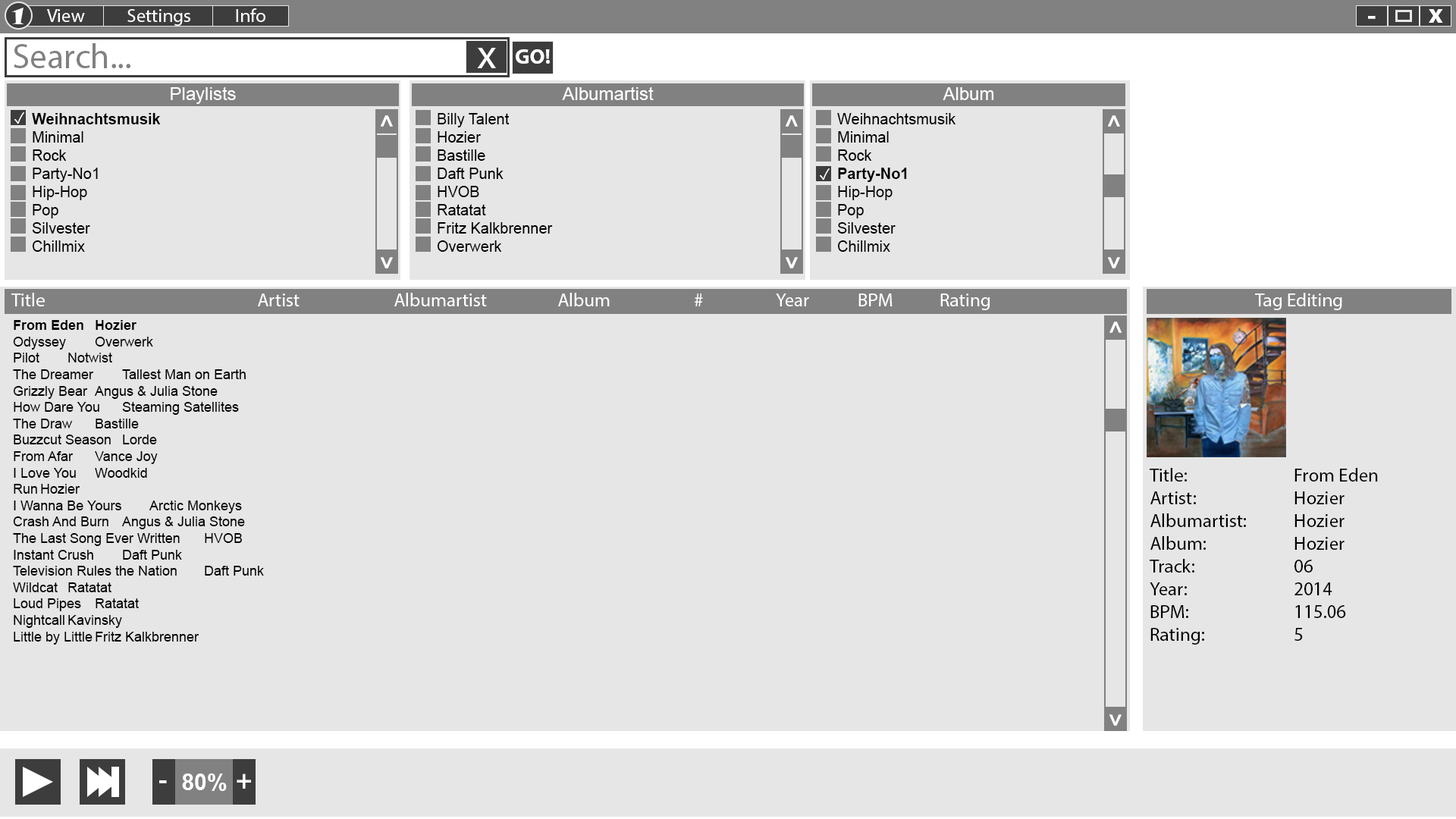
<style>
.page{position:relative;width:1456px;height:819px;background:#e6e6e6}
.page>*{position:absolute;margin:0}
.t1{font:22.7px "SnapITC-Regular";color:#ffffff}
.t2{font:19px "MyriadPro-Regular";color:#ffffff}
.t3{font:27.3px "MyriadPro-Bold";color:#ffffff}
.t4{font:34.9px "MyriadPro-Regular";color:#818181}
.t5{font:41.7px "MyriadPro-Regular";color:#ffffff}
.t6{font:21.2px "MyriadPro-Bold";color:#ffffff}
.t7{font:18.2px "ArialMT";color:#fefefe}
.t8{font:15.2px "ArialMT";color:#000000}
.t9{font:15.2px "Arial-BoldMT";color:#000000}
.t10{font:22.7px "Arial-BoldMT";color:#ffffff}
.t11{font:13.6px "ArialMT";color:#000000}
.t12{font:13.6px "Arial-BoldMT";color:#000000}
.t13{font:19px "MyriadPro-Regular";color:#000000}
</style>
<div class="page">
<p class="t1" style="left:11px;top:8px;width:13px;height:16px">1</p>
<p class="t2" style="left:47px;top:9px;width:38px;height:13px">View</p>
<p class="t2" style="left:127px;top:9px;width:63px;height:17px">Settings</p>
<p class="t2" style="left:236px;top:8px;width:29px;height:14px">Info</p>
<p class="t3" style="left:1368px;top:16px;width:8px;height:3px">-</p>
<p class="t3" style="left:1429px;top:9px;width:14px;height:14px">x</p>
<p class="t4" style="left:14px;top:43px;width:116px;height:25px">Search...</p>
<p class="t5" style="left:477px;top:48px;width:19px;height:20px">x</p>
<p class="t6" style="left:516px;top:49px;width:34px;height:15px">GO!</p>
<p class="t7" style="left:171px;top:86px;width:65px;height:18px">Playlists</p>
<p class="t7" style="left:562px;top:86px;width:92px;height:14px">Albumartist</p>
<p class="t7" style="left:943px;top:87px;width:51px;height:13px">Album</p>
<p class="t8" style="left:32px;top:113px;width:129px;height:139px"><span class="t9">Weihnachtsmusik<br></span>Minimal<br>Rock<br>Party-No1<br>Hip-Hop<br>Pop<br>Silvester<br>Chillmix</p>
<p class="t8" style="left:437px;top:113px;width:116px;height:139px">Billy Talent<br>Hozier<br>Bastille<br>Daft Punk<br>HVOB<br>Ratatat<br>Fritz Kalkbrenner<br>Overwerk</p>
<p class="t8" style="left:837px;top:113px;width:118px;height:139px">Weihnachtsmusik<br>Minimal<br>Rock<br><span class="t9">Party-No1<br></span>Hip-Hop<br>Pop<br>Silvester<br>Chillmix</p>
<p class="t10" style="left:380px;top:115px;width:13px;height:12px;rotate:-90deg">&gt;&lt;</p>
<p class="t10" style="left:785px;top:115px;width:13px;height:12px;rotate:-90deg">&gt;&lt;</p>
<p class="t10" style="left:1107px;top:115px;width:13px;height:12px;rotate:-90deg">&gt;&lt;</p>
<p class="t10" style="left:380px;top:257px;width:13px;height:11px;rotate:-90deg">&lt;</p>
<p class="t10" style="left:785px;top:257px;width:13px;height:11px;rotate:-90deg">&lt;</p>
<p class="t10" style="left:1107px;top:257px;width:13px;height:11px;rotate:-90deg">&lt;</p>
<p class="t2" style="left:11px;top:293px;width:979px;height:17px">Title        Artist    Albumartist   Album    #   Year  BPM  Rating</p>
<p class="t2" style="left:1255px;top:293px;width:87px;height:17px">Tag Editing</p>
<p class="t11" style="left:13px;top:320px;width:251px;height:325px"><span class="t12">From Eden Hozier<br></span>Odyssey  Overwerk<br>Pilot  Notwist<br>The Dreamer  Tallest Man on Earth<br>Grizzly Bear Angus &amp; Julia Stone<br>How Dare You Steaming Satellites<br>The Draw Bastille<br>Buzzcut Season Lorde<br>From Afar Vance Joy<br>I Love You Woodkid<br>Run Hozier<br>I Wanna Be Yours  Arctic Monkeys<br>Crash And Burn Angus &amp; Julia Stone<br>The Last Song Ever Written HVOB<br>Instant Crush  Daft Punk<br>Television Rules the Nation Daft Punk<br>Wildcat Ratatat<br>Loud Pipes Ratatat<br>Nightcall Kavinsky<br>Little by Little Fritz Kalkbrenner</p>
<p class="t10" style="left:1109px;top:322px;width:13px;height:11px;rotate:-90deg">&gt;</p>
<p class="t13" style="left:1150px;top:468px;width:96px;height:177px">Title:<br>Artist:<br>Albumartist:<br>Album:<br>Track:<br>Year:<br>BPM:<br>Rating:</p>
<p class="t13" style="left:1294px;top:468px;width:84px;height:173px">From Eden<br>Hozier<br>Hozier<br>Hozier<br>06<br>2014<br>115.06<br>5</p>
<p class="t10" style="left:1109px;top:714px;width:13px;height:12px;rotate:-90deg">&lt;</p>
<p class="t10" style="left:182px;top:773px;width:45px;height:18px">80%</p>
<p class="t3" style="left:237px;top:773px;width:14px;height:16px">+</p>
<p class="t3" style="left:159px;top:780px;width:8px;height:3px">-</p>
</div>
